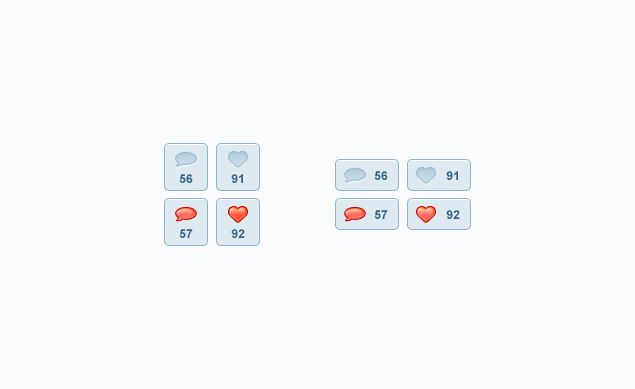
<style>
.page{position:relative;width:635px;height:389px;background:#f9fbfc}
.page>*{position:absolute;margin:0}
.t1{font:12px "Arial-BoldMT";color:#33688a}
</style>
<div class="page">
<p class="t1" style="left:179px;top:174px;width:14px;height:9px">56</p>
<p class="t1" style="left:231px;top:174px;width:12px;height:9px">91</p>
<p class="t1" style="left:374px;top:171px;width:14px;height:9px">56</p>
<p class="t1" style="left:446px;top:171px;width:12px;height:9px">91</p>
<p class="t1" style="left:374px;top:210px;width:14px;height:9px">57</p>
<p class="t1" style="left:446px;top:210px;width:14px;height:9px">92</p>
<p class="t1" style="left:179px;top:229px;width:14px;height:9px">57</p>
<p class="t1" style="left:231px;top:229px;width:14px;height:9px">92</p>
</div>
